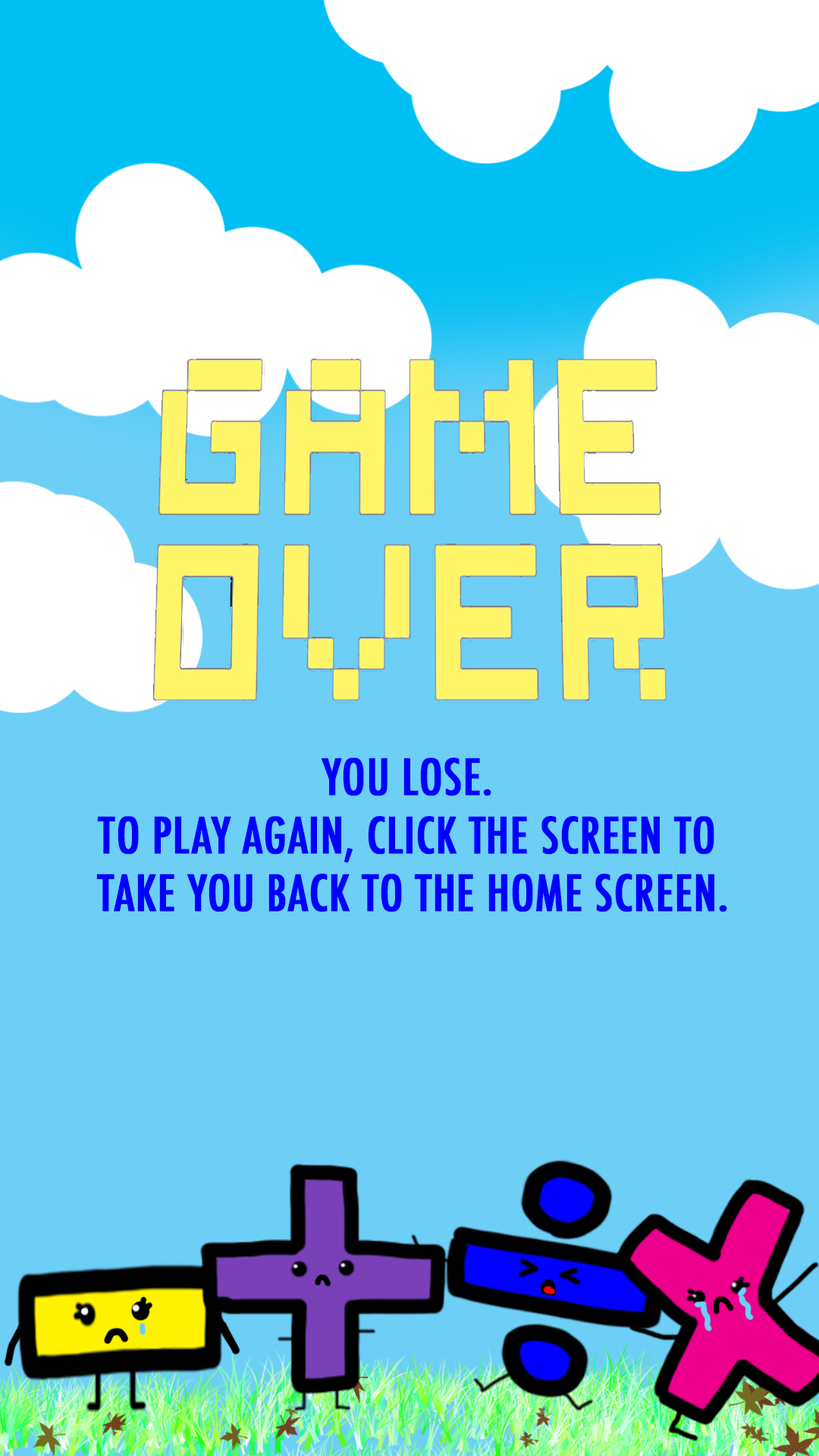
<style>
.page{position:relative;width:819px;height:1456px;background:#6dcff6}
.page>*{position:absolute;margin:0}
.t1{font:48.5px "Futura-CondensedMedium";color:#0000ff;font-weight:bold}
</style>
<div class="page">
<p class="t1" style="left:96px;top:758px;width:631px;height:154px;text-align:center">YOU LOSE. <br>TO PLAY AGAIN, CLICK THE SCREEN TO <br>TAKE YOU BACK TO THE HOME SCREEN.</p>
</div>
